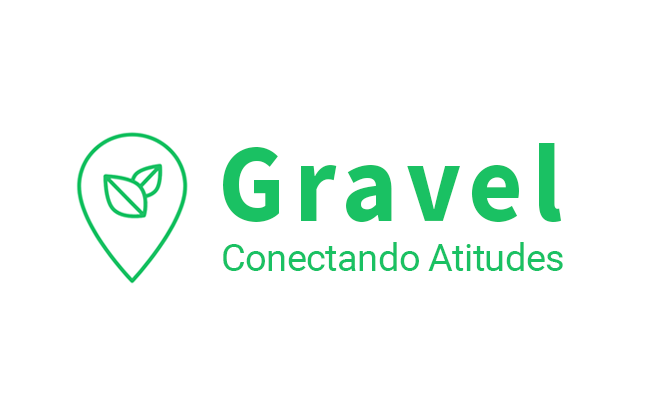
<style>
.page{position:relative;width:660px;height:405px;background:#ffffff}
.page>*{position:absolute;margin:0}
.t1{font:111.1px "SourceSansPro-Bold";letter-spacing:0.08em;color:#1ac163;scale:0.95 1}
.t2{font:38.4px "Roboto-Regular";letter-spacing:-0.02em;color:#1ac163}
</style>
<div class="page">
<p class="t1" style="left:223px;top:143px;width:339px;height:80px">Gravel</p>
<p class="t2" style="left:223px;top:242px;width:340px;height:29px">Conectando Atitudes</p>
</div>
